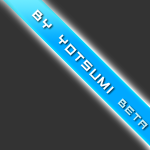
<style>
.page{position:relative;width:150px;height:150px;background:#333333}
.page>*{position:absolute;margin:0}
.t1{font:11px "Aerial";letter-spacing:0.1em;color:#ffffff}
.t2{font:9px "Aerial";letter-spacing:0.1em;color:#c7eff6}
</style>
<div class="page">
<p class="t1" style="left:31px;top:9px;width:117px;height:121px;rotate:46deg">BY YOTSUMI <span class="t2">BETA</span></p>
</div>
